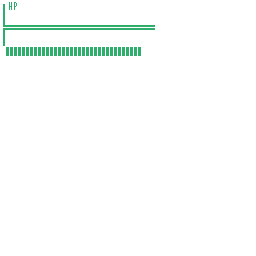
<style>
.page{position:relative;width:256px;height:256px;background:#ffffff}
.page>*{position:absolute;margin:0}
.t1{font:11px "ShomaFallout3";letter-spacing:0.1em;color:#2ead6d}
</style>
<div class="page">
<p class="t1" style="left:9px;top:2px;width:8px;height:8px">HP</p>
</div>
